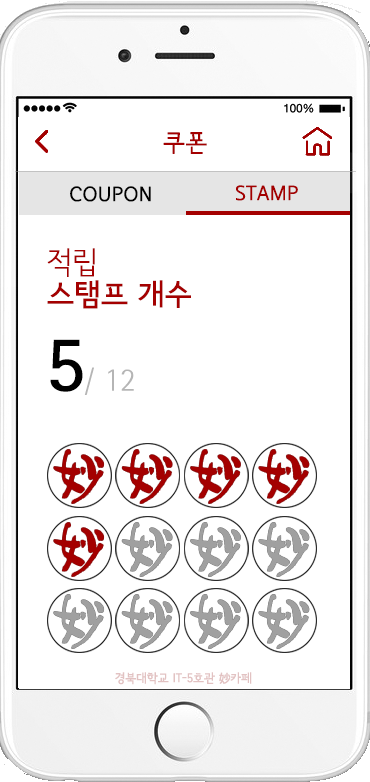
<style>
.page{position:relative;width:370px;height:782px;background:#ffffff}
.page>*{position:absolute;margin:0}
.t1{font:24px "SeoulNamsanL";color:#a40000;font-weight:bold}
.t2{font:20px "SeoulNamsanL";color:#a40000;font-weight:bold}
.t3{font:20px "SeoulNamsanL";color:#000000;font-weight:bold}
.t4{font:30px/32px "SeoulNamsanB";color:#a40000}
.t5{font:30px/32px "SeoulNamsanL";color:#a40000}
.t6{font:29.8px "SeoulNamsanL";color:#b5b5b5}
.t7{font:71.6px "SeoulNamsanB";color:#000000}
.t8{font:12.4px "SeoulNamsanB";color:#e2c2c2}
</style>
<div class="page">
<p class="t1" style="left:163px;top:132px;width:44px;height:22px">쿠폰</p>
<p class="t2" style="left:236px;top:185px;width:62px;height:16px">STAMP</p>
<p class="t3" style="left:70px;top:186px;width:81px;height:16px">COUPON</p>
<p class="t4" style="left:47px;top:248px;width:144px;height:61px"><span class="t5">적립<br></span>스탬프 개수</p>
<p class="t6" style="left:50px;top:339px;width:84px;height:56px"><span class="t7">5</span>/ 12</p>
<p class="t8" style="left:115px;top:672px;width:137px;height:13px">경북대학교 IT-5호관 妙카페</p>
</div>
